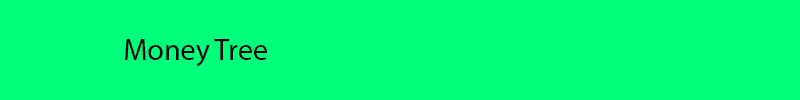
<style>
.page{position:relative;width:800px;height:100px;background:#00ff7b}
.page>*{position:absolute;margin:0}
.t1{font:30px "MyriadPro-Regular";color:#000000}
</style>
<div class="page">
<p class="t1" style="left:125px;top:39px;width:142px;height:28px">Money Tree</p>
</div>
